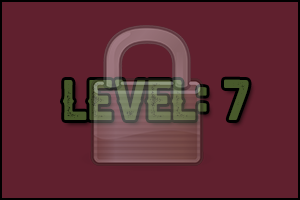
<style>
.page{position:relative;width:300px;height:200px;background:#60202e}
.page>*{position:absolute;margin:0}
.t1{font:35px "AldivaroStampDemo-Stamp"}
</style>
<div class="page">
<p class="t1" style="left:63px;top:79px;width:186px;height:41px">Level: 7</p>
</div>
